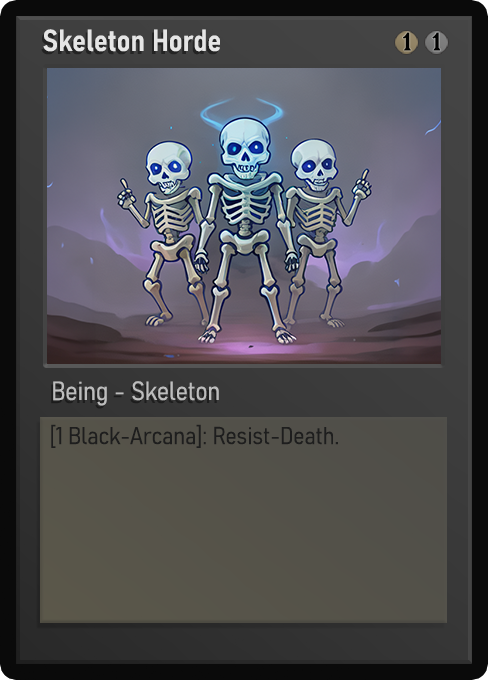
<style>
.page{position:relative;width:488px;height:680px}
.page>*{position:absolute;margin:0}
.t1{font:30px "Bahnschrift-SemiBoldSemiCondensed";color:#f2f2f2;font-weight:bold}
.t2{font:25px "WTRRoycroft";color:#000000;font-weight:bold;scale:1.09 1}
.t3{font:26px "Bahnschrift-LightSemiCondensed";color:#c8c8c8;font-weight:bold}
.t4{font:24px "Bahnschrift-LightSemiCondensed";color:#1e1e1e;font-weight:bold}
</style>
<div class="page">
<p class="t1" style="left:43px;top:29px;width:177px;height:23px;opacity:0.9">Skeleton Horde</p>
<p class="t2" style="left:403px;top:32px;width:8px;height:19px">1</p>
<p class="t2" style="left:432px;top:32px;width:9px;height:19px">1</p>
<p class="t3" style="left:53px;top:381px;width:166px;height:25px;opacity:0.9">Being - Skeleton</p>
<p class="t4" style="left:51px;top:424px;width:287px;height:24px">[1 Black-Arcana]: Resist-Death.</p>
</div>
